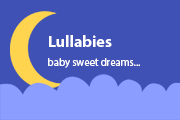
<style>
.page{position:relative;width:180px;height:120px;background:#3f51b5}
.page>*{position:absolute;margin:0}
.t1{font:10.7px "MyriadPro-Regular";color:#ffffff}
.t2{font:16px "MyriadPro-Bold";color:#ffffff}
</style>
<div class="page">
<p class="t1" style="left:48px;top:35px;width:92px;height:33px"><span class="t2">Lullabies<br><br></span>baby sweet dreams...</p>
</div>
